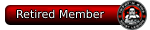
<style>
.page{position:relative;width:150px;height:30px;background:#ffffff}
.page>*{position:absolute;margin:0}
.t1{font:11px "Tahoma";color:#ffffff}
</style>
<div class="page">
<p class="t1" style="left:17px;top:9px;width:88px;height:10px">Retired Member</p>
</div>
